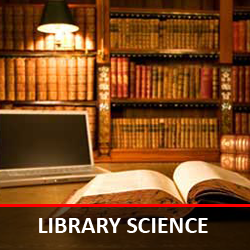
<style>
.page{position:relative;width:250px;height:250px}
.page>*{position:absolute;margin:0}
.t1{font:24px "Calibri-Bold";color:#ffffff;text-transform:uppercase}
</style>
<div class="page">
<p class="t1" style="left:39px;top:218px;width:169px;height:15px">library science</p>
</div>
